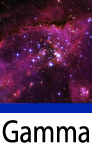
<style>
.page{position:relative;width:92px;height:150px}
.page>*{position:absolute;margin:0}
.t1{font:32.3px "MyriadPro-Regular";color:#000000;scale:0.84 1}
</style>
<div class="page">
<p class="t1" style="left:2px;top:120px;width:88px;height:23px">Gamma</p>
</div>
